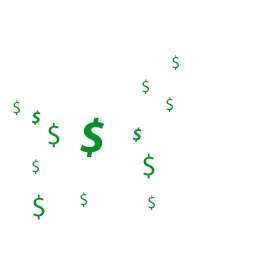
<style>
.page{position:relative;width:256px;height:256px;background:#ffffff}
.page>*{position:absolute;margin:0}
.t1{font:18px "MyriadPro-Regular";color:#00942a}
.t2{font:18px "MyriadPro-BoldIt";color:#00942a}
.t3{font:30px "MyriadPro-Regular";color:#00942a}
.t4{font:48px "MyriadPro-BoldIt";color:#00942a}
</style>
<div class="page">
<p class="t1" style="left:172px;top:55px;width:7px;height:15px">$</p>
<p class="t1" style="left:142px;top:79px;width:7px;height:15px">$</p>
<p class="t1" style="left:13px;top:100px;width:7px;height:15px">$</p>
<p class="t1" style="left:166px;top:97px;width:7px;height:15px">$</p>
<p class="t2" style="left:31px;top:110px;width:10px;height:15px">$</p>
<p class="t3" style="left:48px;top:122px;width:12px;height:26px">$</p>
<p class="t4" style="left:80px;top:117px;width:25px;height:40px">$</p>
<p class="t2" style="left:132px;top:127px;width:10px;height:15px">$</p>
<p class="t1" style="left:32px;top:159px;width:7px;height:15px">$</p>
<p class="t3" style="left:143px;top:153px;width:12px;height:26px">$</p>
<p class="t3" style="left:33px;top:194px;width:12px;height:26px">$</p>
<p class="t1" style="left:80px;top:192px;width:7px;height:15px">$</p>
<p class="t1" style="left:148px;top:195px;width:7px;height:15px">$</p>
</div>
